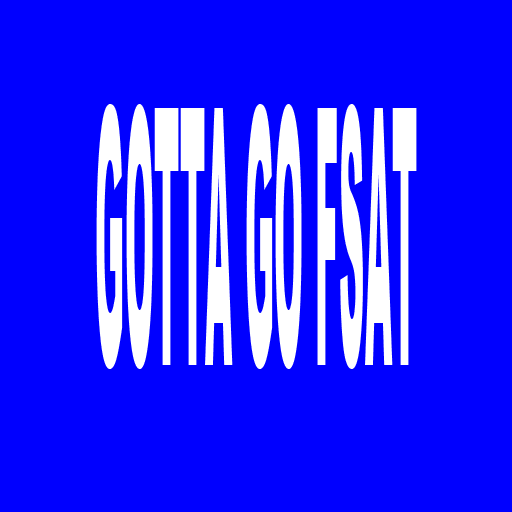
<style>
.page{position:relative;width:512px;height:512px;background:#0000ff}
.page>*{position:absolute;margin:0}
.t1{font:358.9px "Arial-Black";color:#ffffff;scale:0.1 1}
</style>
<div class="page">
<p class="t1" style="left:96px;top:104px;width:321px;height:265px">GOTTA GO FSAT</p>
</div>
